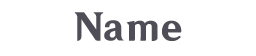
<style>
.page{position:relative;width:256px;height:56px;background:#ffffff}
.page>*{position:absolute;margin:0}
.t1{font:36px "HYWenHei-HEW";color:#4f4e57}
</style>
<div class="page">
<p class="t1" style="left:74px;top:12px;width:108px;height:29px">Name</p>
</div>
